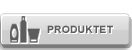
<style>
.page{position:relative;width:132px;height:50px;background:#ffffff}
.page>*{position:absolute;margin:0}
.t1{font:9.9px "Arial-BoldMT";color:#5e5d5d;text-transform:uppercase;scale:1.07 1}
</style>
<div class="page">
<p class="t1" style="left:47px;top:25px;width:66px;height:8px">Produktet</p>
</div>
